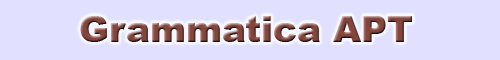
<style>
.page{position:relative;width:500px;height:60px;background:#e1e1ff}
.page>*{position:absolute;margin:0}
.t1{font:36px "Arial-Black"}
</style>
<div class="page">
<p class="t1" style="left:80px;top:16px;width:332px;height:26px">Grammatica APT</p>
</div>
